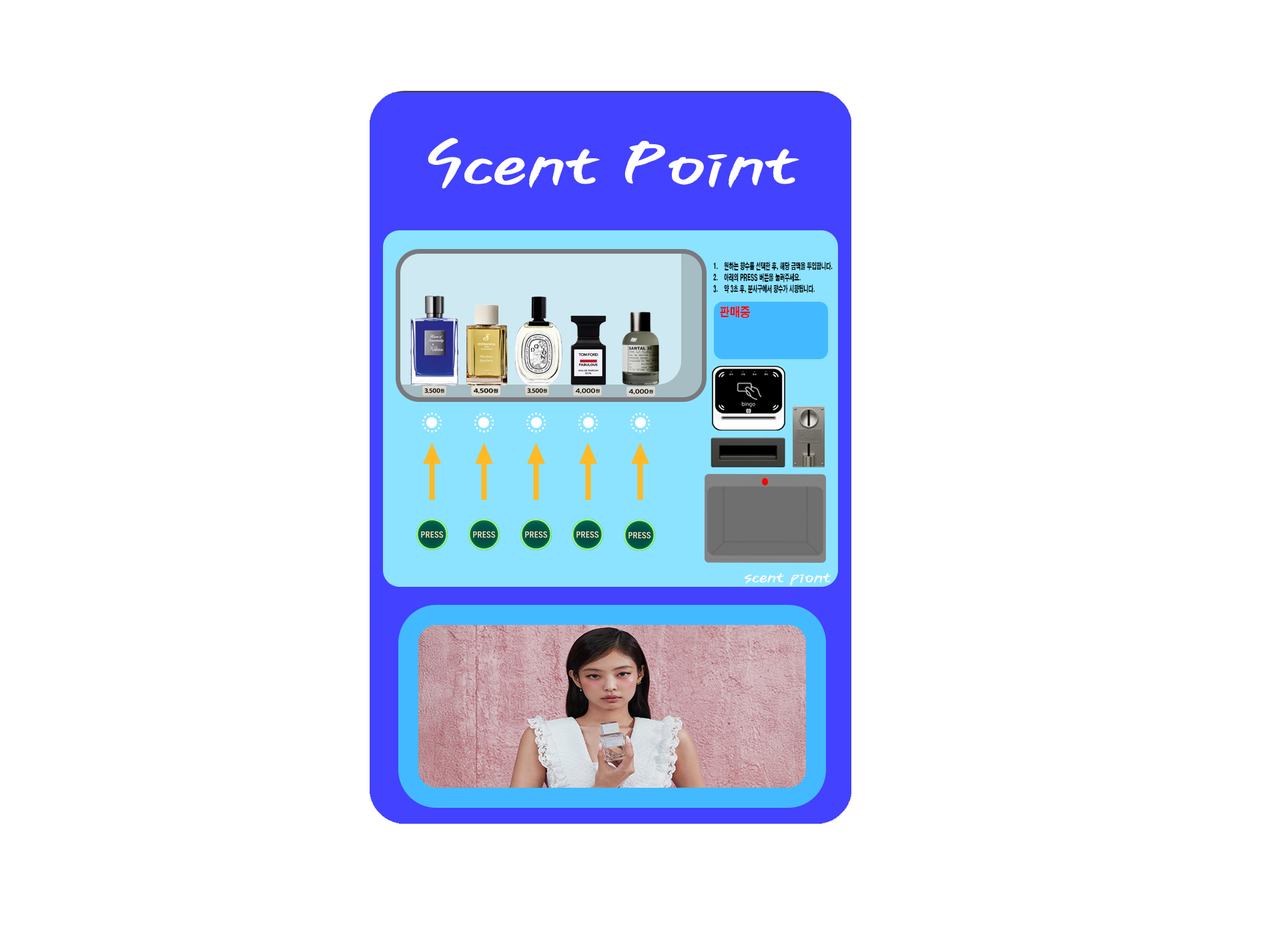
<style>
.page{position:relative;width:1261px;height:946px;background:#ffffff}
.page>*{position:absolute;margin:0}
.t1{font:62px "TTOhneuleunB";color:#ffffff;scale:1.45 1}
.t2{font:8.4px "H2gtrE";color:#000000;scale:0.57 1}
.t3{font:12.1px "H2gtrE";color:#ff0000;scale:0.85 1}
.t4{font:16.3px "TTOhneuleunB";color:#ffffff;scale:1.29 1}
</style>
<div class="page">
<p class="t1" style="left:428px;top:137px;width:371px;height:52px">Scent Point</p>
<p class="t2" style="left:713px;top:262px;width:120px;height:31px">원하는 향수를 선택한 후, 해당 금액을 투입합니다.<br>아래의 PRESS 버튼을 눌러주세요.<br>약 3초 후, 분사구에서 향수가 시향됩니다.</p>
<p class="t3" style="left:720px;top:306px;width:30px;height:12px">판매중</p>
<p class="t4" style="left:745px;top:573px;width:86px;height:13px">scent piont</p>
</div>
